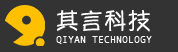
<style>
.page{position:relative;width:178px;height:52px;background:#333333}
.page>*{position:absolute;margin:0}
.t1{font:24px "YuppySC-Regular";color:#ffffff}
.t2{font:10px "AndaleMono";color:#ffffff}
</style>
<div class="page">
<p class="t1" style="left:57px;top:10px;width:93px;height:22px">其言科技</p>
<p class="t2" style="left:56px;top:36px;width:96px;height:8px">QIYAN TECHNOLOGY</p>
</div>
